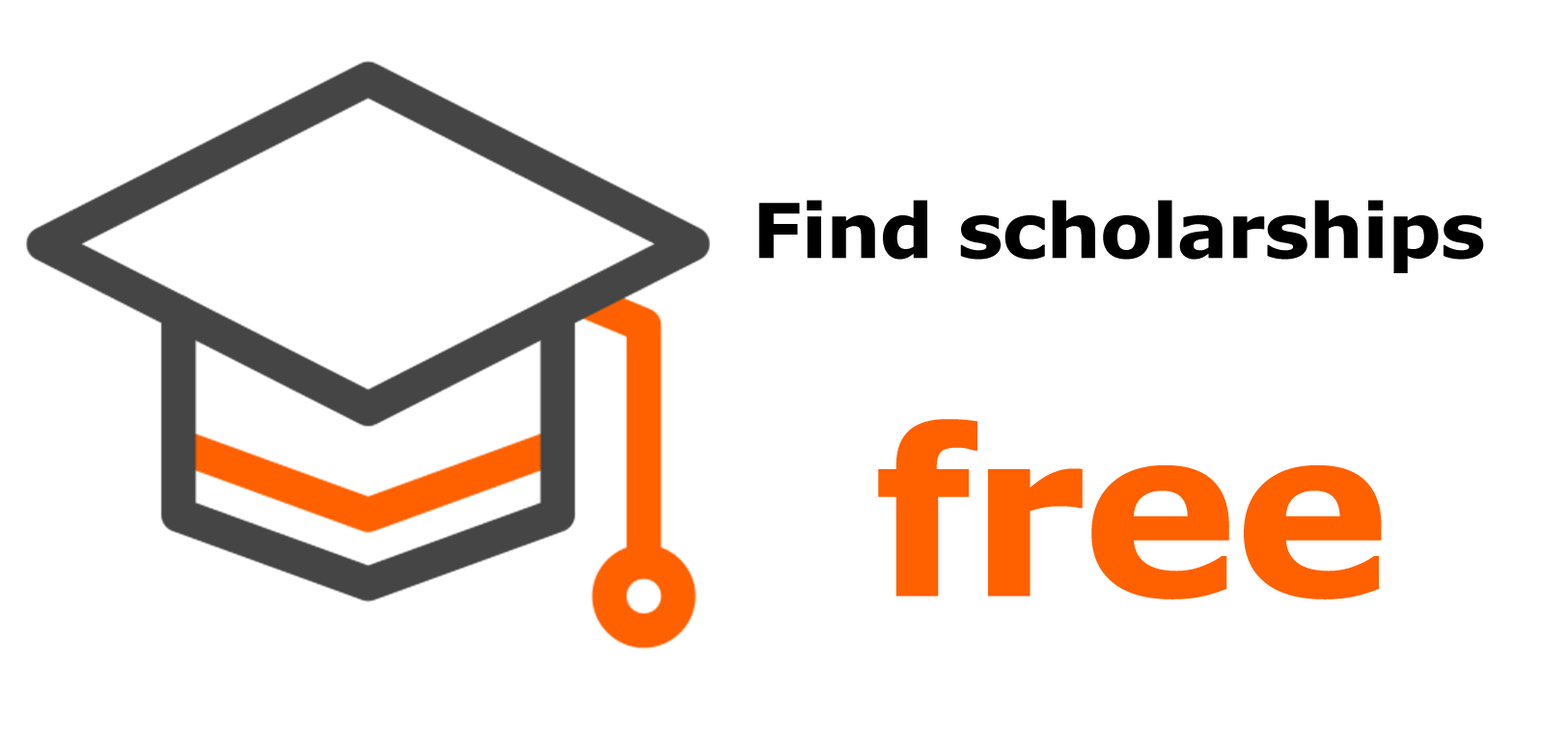
<style>
.page{position:relative;width:1568px;height:752px;background:#ffffff}
.page>*{position:absolute;margin:0}
.t1{font:75.8px "Verdana-Bold";letter-spacing:-0.02em;color:#000000}
.t2{font:230.8px "Verdana-Bold";letter-spacing:-0.02em;color:#ff6000}
</style>
<div class="page">
<p class="t1" style="left:758px;top:200px;width:726px;height:399px;text-align:center">Find scholarships <br><span class="t2">free</span></p>
</div>
